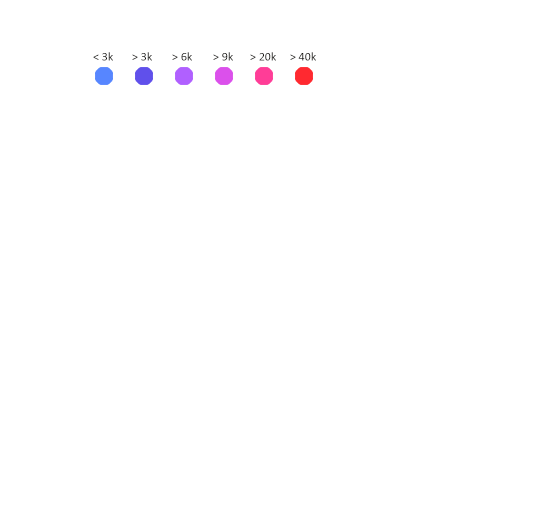
<style>
.page{position:relative;width:550px;height:512px;background:#ffffff}
.page>*{position:absolute;margin:0}
.t1{font:12px "Calibri";color:#14120e}
.t2{font:12px "Calibri"}
</style>
<div class="page">
<p class="t1" style="left:93px;top:52px;width:20px;height:9px">&lt; 3k</p>
<p class="t1" style="left:132px;top:52px;width:20px;height:9px">&gt; 3k</p>
<p class="t2" style="left:172px;top:52px;width:20px;height:9px">&gt; 6k</p>
<p class="t2" style="left:213px;top:52px;width:20px;height:9px">&gt; 9k</p>
<p class="t1" style="left:250px;top:52px;width:26px;height:9px">&gt; 20k</p>
<p class="t1" style="left:290px;top:52px;width:26px;height:9px">&gt; 40k</p>
</div>
